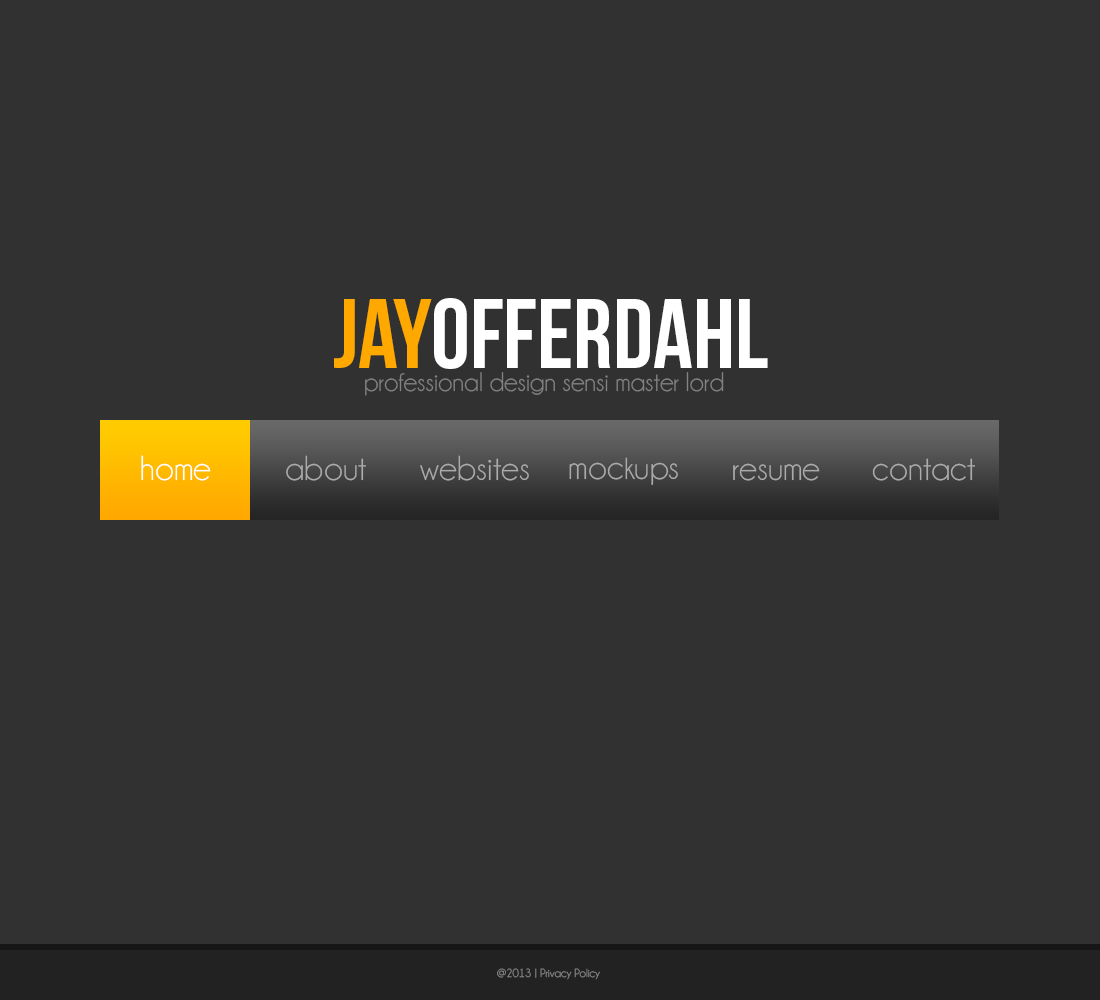
<style>
.page{position:relative;width:1100px;height:1000px;background:#313131}
.page>*{position:absolute;margin:0}
.t1{font:98.2px "BebasNeue";color:#ffffff}
.t2{font:98.2px "BebasNeue";color:#ffa800}
.t3{font:27px "Champagne&Limousines";color:#838383}
.t4{font:35px "Champagne&Limousines";color:#ffffff}
.t5{font:35px "Champagne&Limousines";color:#ababab}
.t6{font:35px "Champagne&Limousines";color:#aaaaaa}
.t7{font:12px "Champagne&Limousines";color:#838383}
</style>
<div class="page">
<p class="t1" style="left:334px;top:298px;width:434px;height:71px"><span class="t2">JAY</span>OFFERDAHL</p>
<p class="t3" style="left:365px;top:372px;width:359px;height:24px">professional design sensi master lord</p>
<p class="t4" style="left:141px;top:455px;width:70px;height:26px">home</p>
<p class="t5" style="left:286px;top:455px;width:80px;height:26px">about</p>
<p class="t5" style="left:420px;top:455px;width:109px;height:26px">websites</p>
<p class="t6" style="left:569px;top:457px;width:109px;height:28px">mockups</p>
<p class="t5" style="left:872px;top:458px;width:103px;height:23px">contact</p>
<p class="t5" style="left:733px;top:463px;width:87px;height:18px">resume</p>
<p class="t7" style="left:497px;top:968px;width:103px;height:12px">@2013 | Privacy Policy</p>
</div>
